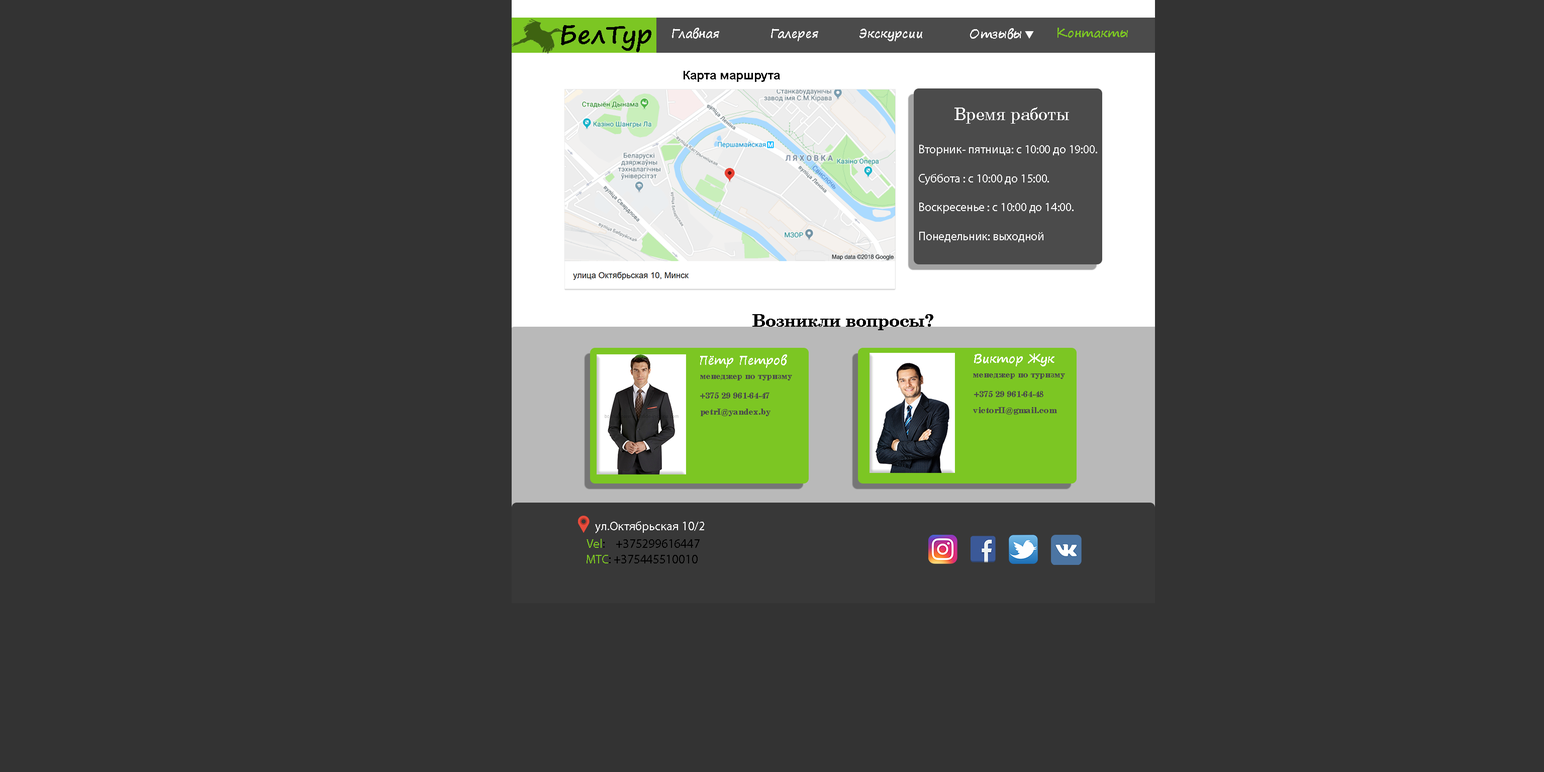
<style>
.page{position:relative;width:1544px;height:772px;background:#333333}
.page>*{position:absolute;margin:0}
.t1{font:25.1px "SegoePrint-Bold";color:#000000}
.t2{font:12.1px "SegoePrint-Bold";color:#ffffff}
.t3{font:12.1px "SegoePrint-Bold";color:#7cc623}
.t4{font:12.1px "Arial-BoldMT";color:#000000}
.t5{font:17.6px "CenturySchlbkCyrillicBT-Roman";color:#ffffff}
.t6{font:12.1px "MyriadPro-Regular";color:#ffffff}
.t7{font:17.1px "CenturySchlbkCyrillicBT-Bold";color:#000000}
.t8{font:12.6px "MyriadPro-Regular";color:#ffffff}
.t9{font:12.6px "MyriadPro-Regular";color:#000000}
.t10{font:12.6px "MyriadPro-Regular";color:#7cc623}
</style>
<div class="page">
<p class="t1" style="left:561px;top:25px;width:91px;height:27px">БелТур</p>
<p class="t2" style="left:672px;top:28px;width:47px;height:11px">Главная</p>
<p class="t2" style="left:771px;top:29px;width:47px;height:12px">Галерея</p>
<p class="t2" style="left:860px;top:29px;width:62px;height:12px">Экскурсии</p>
<p class="t2" style="left:970px;top:28px;width:51px;height:11px">Отзывы</p>
<p class="t3" style="left:1058px;top:28px;width:70px;height:10px">Контакты</p>
<p class="t4" style="left:684px;top:71px;width:96px;height:11px">Карта маршрута</p>
<p class="t5" style="left:955px;top:107px;width:114px;height:17px">Время работы</p>
<p class="t6" style="left:919px;top:145px;width:178px;height:97px">Вторник- пятница: с 10:00 до 19:00. <br><br>Суббота : с 10:00 до 15:00. <br><br>Воскресенье : с 10:00 до 14:00.<br><br>Понедельник: выходной</p>
<p class="t7" style="left:753px;top:314px;width:181px;height:16px">Возникли вопросы?</p>
<p class="t8" style="left:595px;top:521px;width:109px;height:12px">ул.Октябрьская 10/2</p>
<p class="t9" style="left:587px;top:539px;width:113px;height:9px"><span class="t10">Vel</span>:    +375299616447</p>
<p class="t9" style="left:587px;top:555px;width:111px;height:9px"><span class="t10">MTC</span>: +375445510010</p>
</div>
